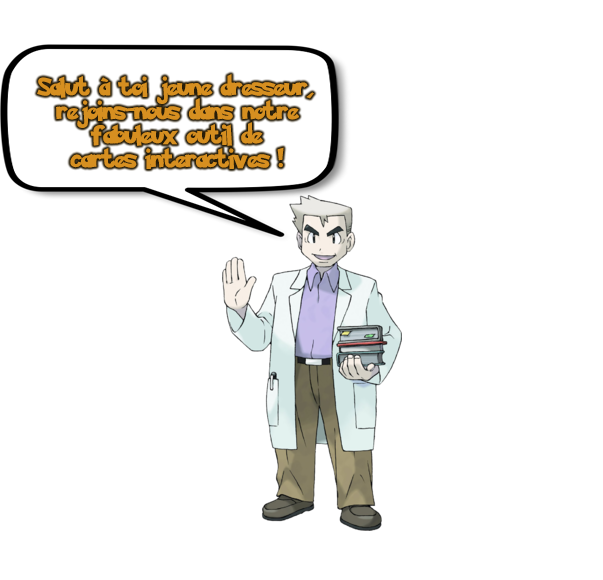
<style>
.page{position:relative;width:603px;height:580px;background:#ffffff}
.page>*{position:absolute;margin:0}
.t1{font:20px "PokemonSolidNormal";color:#d68f20}
</style>
<div class="page">
<p class="t1" style="left:37px;top:74px;width:277px;height:95px;text-align:center">Salut à toi jeune dresseur, <br>rejoins-nous dans notre <br>fabuleux outil de <br>cartes interactives !</p>
</div>
